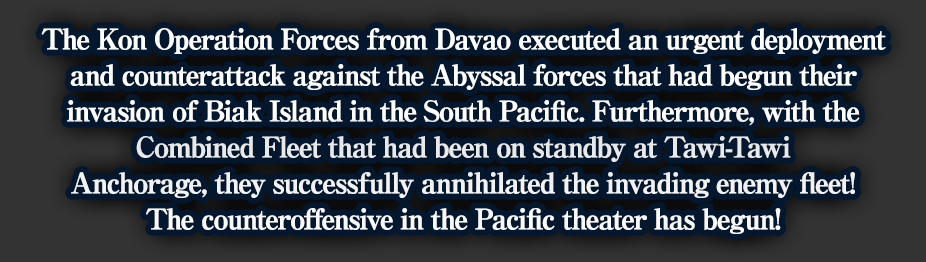
<style>
.page{position:relative;width:926px;height:262px;background:#03172f}
.page>*{position:absolute;margin:0}
.t1{font:28px/36px "RyuminPro-ExBold";letter-spacing:-0.08em;color:#ffffff;font-weight:bold}
</style>
<div class="page">
<p class="t1" style="left:41px;top:28px;width:845px;height:206px;text-align:center">The Kon Operation Forces from Davao executed an urgent deployment<br>and counterattack against the Abyssal forces that had begun their<br>invasion of Biak Island in the South Pacific. Furthermore, with the<br>Combined Fleet that had been on standby at Tawi-Tawi<br>Anchorage, they successfully annihilated the invading enemy fleet!<br>The counteroffensive in the Pacific theater has begun!</p>
</div>
